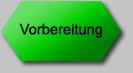
<style>
.page{position:relative;width:133px;height:73px;background:#c6c3c6}
.page>*{position:absolute;margin:0}
.t1{font:14.7px "ArialMT";color:#000000}
</style>
<div class="page">
<p class="t1" style="left:19px;top:23px;width:83px;height:15px">Vorbereitung</p>
</div>
